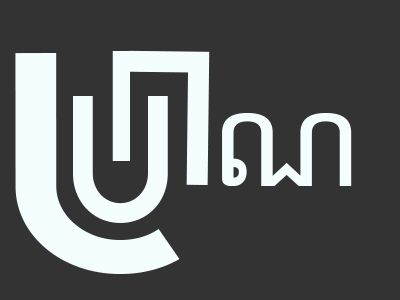
<style>
.page{position:relative;width:400px;height:300px;background:#333333}
.page>*{position:absolute;margin:0}
.t1{font:275.8px "LEMONMILK-Regular";color:#f5feff;scale:1.19 1}
.t2{font:139.6px "LEMONMILK-Regular";color:#f5feff}
.t3{font:169.2px "LEMONMILK-Regular";color:#f5feff}
.t4{font:159.4px "LEMONMILK-Regular";color:#f5feff}
.t5{font:123.6px "NotoSansKhmer-Regular";color:#f5feff}
</style>
<div class="page">
<p class="t1" style="left:15px;top:53px;width:165px;height:221px;rotate:180deg">J</p>
<p class="t2" style="left:112px;top:51px;width:18px;height:110px">i</p>
<p class="t3" style="left:128px;top:50px;width:82px;height:135px;rotate:-179deg">L</p>
<p class="t4" style="left:73px;top:96px;width:95px;height:127px">U</p>
<p class="t5" style="left:222px;top:113px;width:130px;height:73px">ណ</p>
</div>
